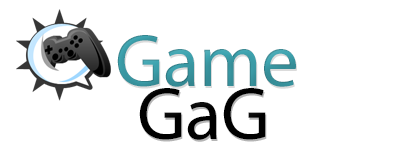
<style>
.page{position:relative;width:414px;height:154px;background:#ffffff}
.page>*{position:absolute;margin:0}
.t1{font:75px "MyriadPro-Regular";letter-spacing:-0.01em;color:#3fa5b1}
.t2{font:75px "MyriadPro-Regular";letter-spacing:-0.01em;color:#000000}
</style>
<div class="page">
<p class="t1" style="left:117px;top:35px;width:179px;height:52px">Game</p>
<p class="t2" style="left:139px;top:88px;width:127px;height:52px">GaG</p>
</div>
